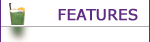
<style>
.page{position:relative;width:150px;height:42px;background:#ffffff}
.page>*{position:absolute;margin:0}
.t1{font:15px "Verdana";color:#612b83;font-weight:bold}
</style>
<div class="page">
<p class="t1" style="left:58px;top:8px;width:80px;height:13px">FEATURES</p>
</div>
